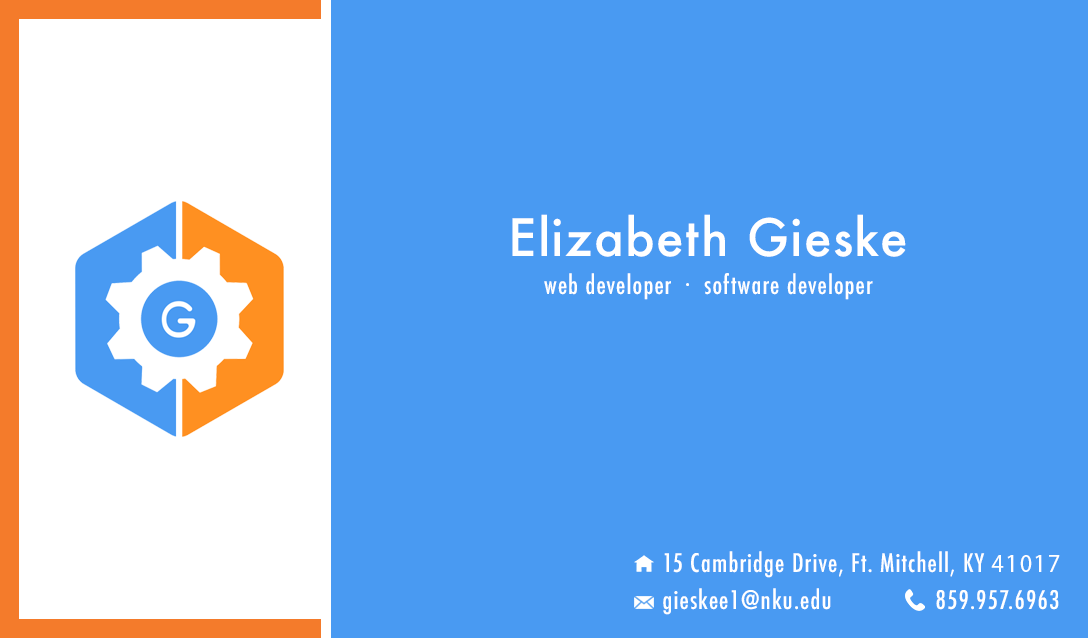
<style>
.page{position:relative;width:1088px;height:638px;background:#499af2}
.page>*{position:absolute;margin:0}
.t1{font:50px "Futura-Medium";letter-spacing:0.025em;color:#ffffff}
.t2{font:25px "Futura-CondensedMedium";letter-spacing:0.045em;color:#ffffff}
.t3{font:25px "MyriadPro-Regular";letter-spacing:0.045em;color:#ffffff}
</style>
<div class="page">
<p class="t1" style="left:512px;top:214px;width:394px;height:43px">Elizabeth Gieske</p>
<p class="t2" style="left:544px;top:273px;width:329px;height:27px">web developer  ∙  software developer</p>
<p class="t2" style="left:664px;top:551px;width:396px;height:27px">15 Cambridge Drive, Ft. Mitchell, KY <span class="t3">41017</span></p>
<p class="t2" style="left:663px;top:588px;width:168px;height:27px">gieskee1@nku.edu</p>
<p class="t2" style="left:936px;top:590px;width:123px;height:20px">859.957.6963</p>
</div>
